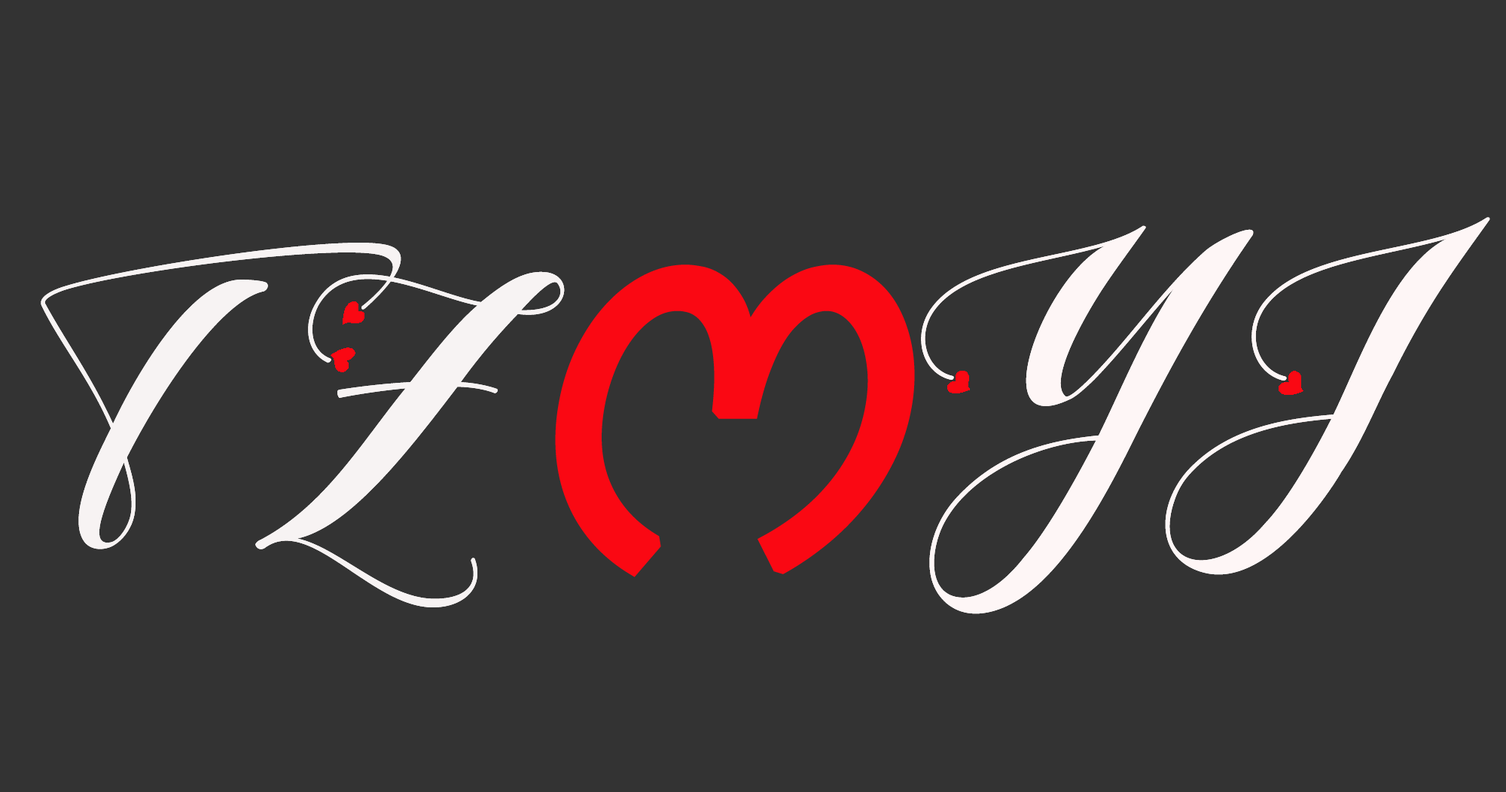
<style>
.page{position:relative;width:1506px;height:792px;background:#333333}
.page>*{position:absolute;margin:0}
.t1{font:401.7px "LoveyaScript-Regular";letter-spacing:-0.025em;color:#fef6f6;font-style:italic}
.t2{font:401.7px "LoveyaScript-Regular";letter-spacing:-0.01em;color:#f7f3f3;font-style:italic}
.t3{font:495.8px "NirmalaUI";letter-spacing:-0.1em;color:#fa0813;font-weight:bold;font-style:italic}
</style>
<div class="page">
<p class="t1" style="left:921px;top:217px;width:570px;height:397px">YJ</p>
<p class="t2" style="left:41px;top:243px;width:524px;height:364px">TZ</p>
<p class="t3" style="left:555px;top:264px;width:360px;height:313px">ෆ</p>
</div>
